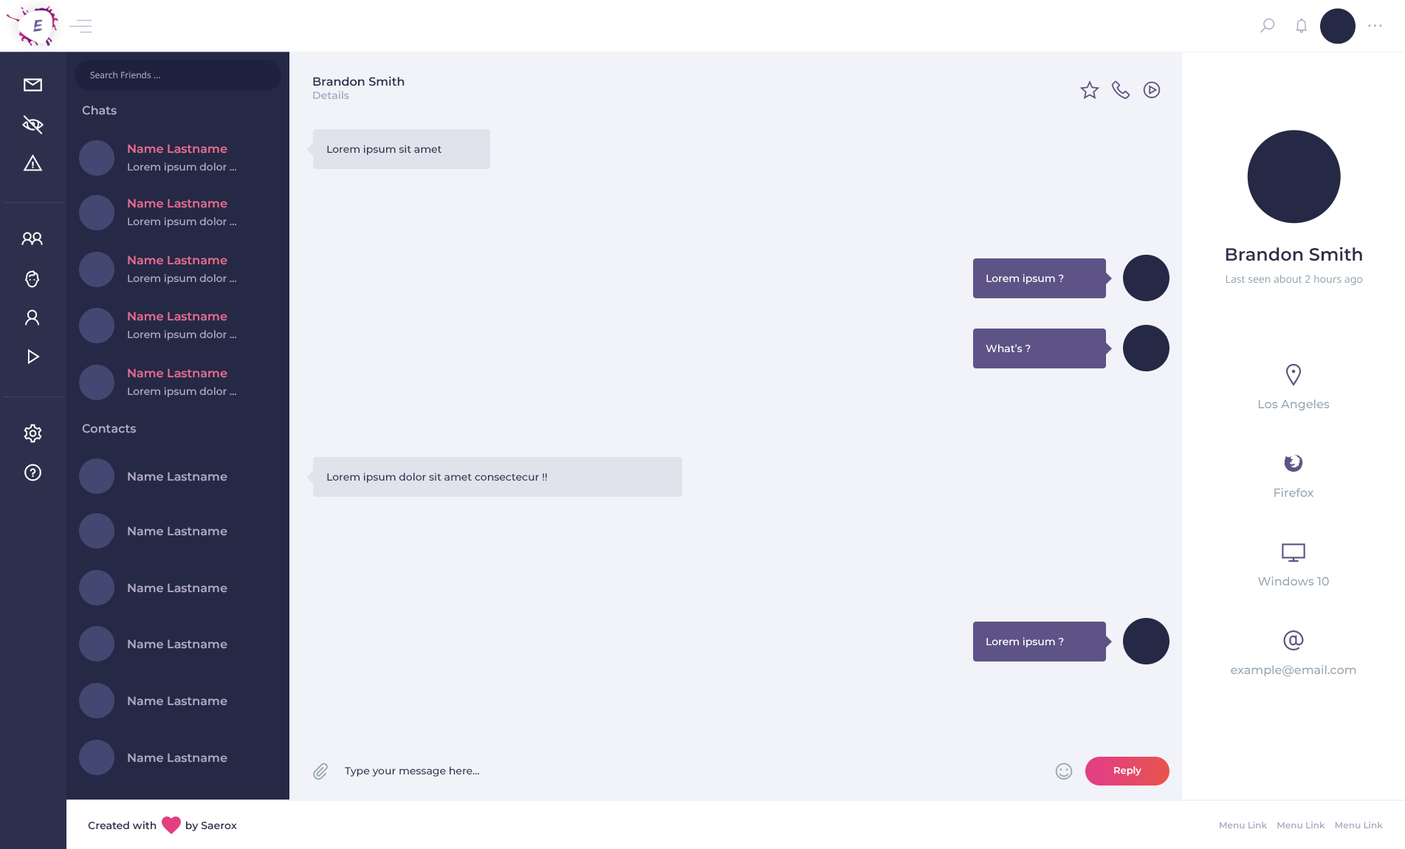
<style>
.page{position:relative;width:1405px;height:849px;background:#f2f3f8}
.page>*{position:absolute;margin:0}
.t1{font:8.9px "NotoSans-Regular";color:#aea9c3}
.t2{font:11.8px/13.3px "Montserrat-SemiBold";color:#2c304d}
.t3{font:10.3px/13.3px "Montserrat-SemiBold";color:#aea9c3}
.t4{font:11.8px "Montserrat-SemiBold";color:#aea9c3}
.t5{font:10.3px/17.7px "Montserrat-Medium";color:#aea9c3}
.t6{font:11.8px/17.7px "Montserrat-SemiBold";color:#e76c90}
.t7{font:10.3px "Montserrat-Medium";color:#2c304d}
.t8{font:10.3px/22.1px "NotoSans-Regular";color:#94a4b0}
.t9{font:17.7px/22.1px "Montserrat-SemiBold";color:#2c304d}
.t10{font:10.3px "Montserrat-Medium";color:#ffffff}
.t11{font:11.8px/22.1px "Montserrat-Medium";color:#94a4b0}
.t12{font:9.6px "Montserrat-SemiBold";color:#ffffff}
.t13{font:10.3px "Montserrat-SemiBold";color:#2c304d}
.t14{font:8.9px "Montserrat-SemiBold";color:#aea9c3}
</style>
<div class="page">
<p class="t1" style="left:90px;top:72px;width:70px;height:7px">Search Friends ...</p>
<p class="t2" style="left:313px;top:76px;width:92px;height:24px">Brandon Smith <br><span class="t3">Details</span></p>
<p class="t4" style="left:82px;top:106px;width:35px;height:9px">Chats</p>
<p class="t5" style="left:128px;top:144px;width:108px;height:29px"><span class="t6">Name Lastname <br></span>Lorem ipsum dolor ...</p>
<p class="t7" style="left:327px;top:145px;width:114px;height:10px">Lorem ipsum sit amet</p>
<p class="t5" style="left:128px;top:199px;width:108px;height:28px"><span class="t6">Name Lastname <br></span>Lorem ipsum dolor ...</p>
<p class="t5" style="left:128px;top:255px;width:108px;height:29px"><span class="t6">Name Lastname <br></span>Lorem ipsum dolor ...</p>
<p class="t8" style="left:1225px;top:247px;width:137px;height:39px;text-align:center"><span class="t9">Brandon Smith<br></span>Last seen about 2 hours ago</p>
<p class="t10" style="left:986px;top:274px;width:78px;height:10px">Lorem ipsum ?</p>
<p class="t5" style="left:128px;top:312px;width:108px;height:28px"><span class="t6">Name Lastname <br></span>Lorem ipsum dolor ...</p>
<p class="t10" style="left:985px;top:344px;width:45px;height:8px">What’s ?</p>
<p class="t5" style="left:128px;top:368px;width:108px;height:29px"><span class="t6">Name Lastname <br></span>Lorem ipsum dolor ...</p>
<p class="t11" style="left:1231px;top:399px;width:125px;height:278px;text-align:center">Los Angeles<br><br><br><br>Firefox<br><br><br><br>Windows 10<br><br><br><br>example@email.com</p>
<p class="t4" style="left:82px;top:424px;width:54px;height:9px">Contacts</p>
<p class="t4" style="left:128px;top:472px;width:99px;height:9px">Name Lastname</p>
<p class="t7" style="left:327px;top:472px;width:220px;height:11px">Lorem ipsum dolor sit amet consectecur !!</p>
<p class="t4" style="left:128px;top:526px;width:99px;height:10px">Name Lastname</p>
<p class="t4" style="left:128px;top:583px;width:99px;height:10px">Name Lastname</p>
<p class="t4" style="left:128px;top:639px;width:99px;height:10px">Name Lastname</p>
<p class="t10" style="left:986px;top:637px;width:78px;height:10px">Lorem ipsum ?</p>
<p class="t4" style="left:128px;top:696px;width:99px;height:10px">Name Lastname</p>
<p class="t4" style="left:128px;top:753px;width:99px;height:10px">Name Lastname</p>
<p class="t7" style="left:345px;top:766px;width:134px;height:11px">Type your message here...</p>
<p class="t12" style="left:1114px;top:766px;width:27px;height:10px">Reply</p>
<p class="t13" style="left:88px;top:821px;width:149px;height:10px">Created with          by Saerox</p>
<p class="t14" style="left:1219px;top:821px;width:164px;height:8px">Menu Link    Menu Link    Menu Link</p>
</div>
